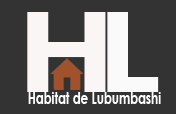
<style>
.page{position:relative;width:176px;height:114px;background:#333333}
.page>*{position:absolute;margin:0}
.t1{font:111.8px "CenturyGothic-Bold";color:#fbf6f6;scale:1.35 1}
.t2{font:111.8px "CenturyGothic-Bold";color:#fafafa;scale:1.35 1}
.t3{font:16.4px "CenturyGothic-Bold";color:#ffffff;scale:0.73 1}
</style>
<div class="page">
<p class="t1" style="left:27px;top:12px;width:79px;height:80px">H</p>
<p class="t2" style="left:107px;top:12px;width:52px;height:80px">L</p>
<p class="t3" style="left:28px;top:92px;width:133px;height:12px">Habitat de Lubumbashi</p>
</div>
